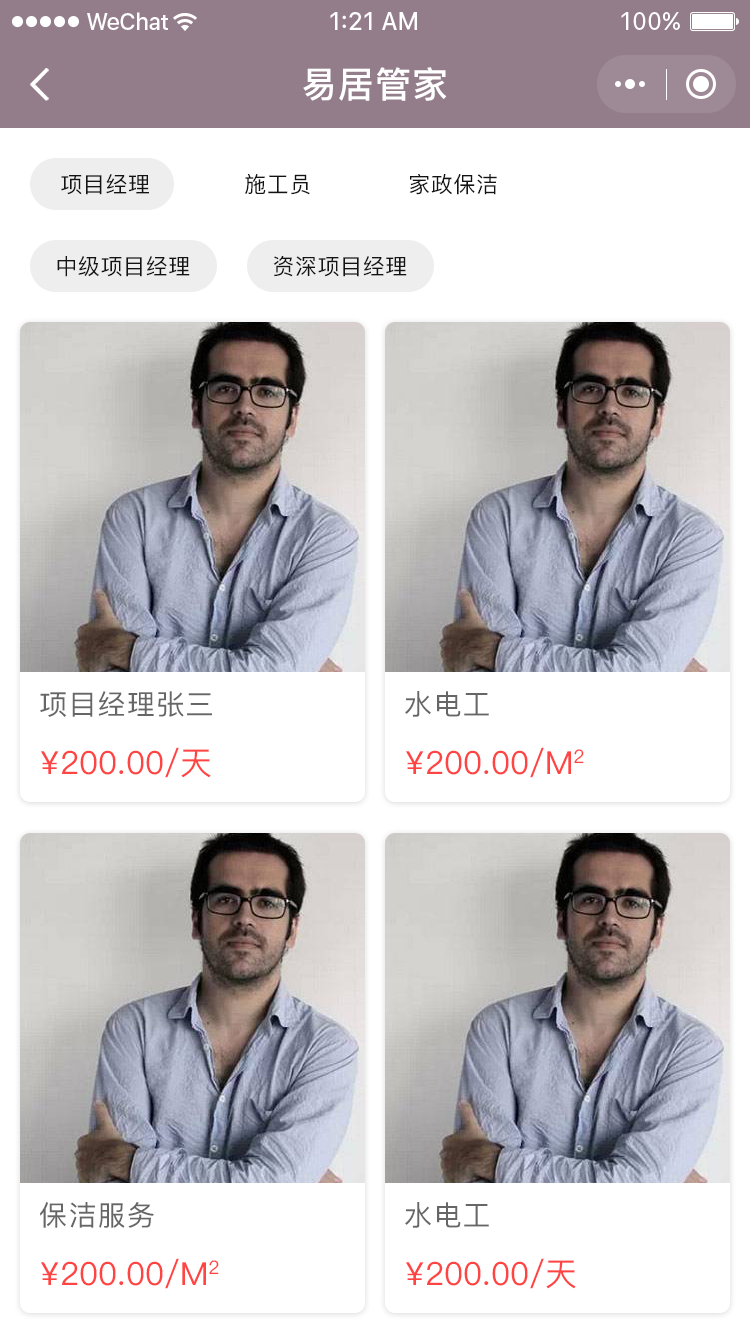
<style>
.page{position:relative;width:750px;height:1342px;background:#ffffff}
.page>*{position:absolute;margin:0}
.t1{font:36px "PingFang-SC-Bold";letter-spacing:0.028em;color:#ffffff}
.t2{font:22px "PingFang-SC-Medium";letter-spacing:0.028em;color:#131313}
.t3{font:28px "PingFang-SC-Medium";letter-spacing:0.048em;color:#666666}
.t4{font:32px "PingFang-SC-Medium";color:#ff4444}
</style>
<div class="page">
<p class="t1" style="left:303px;top:67px;width:144px;height:34px">易居管家</p>
<p class="t2" style="left:61px;top:174px;width:88px;height:21px">项目经理</p>
<p class="t2" style="left:245px;top:174px;width:65px;height:21px">施工员</p>
<p class="t2" style="left:410px;top:174px;width:87px;height:21px">家政保洁</p>
<p class="t2" style="left:57px;top:256px;width:133px;height:21px">中级项目经理</p>
<p class="t2" style="left:273px;top:256px;width:134px;height:21px">资深项目经理</p>
<p class="t3" style="left:40px;top:691px;width:172px;height:26px">项目经理张三</p>
<p class="t3" style="left:405px;top:691px;width:84px;height:26px">水电工</p>
<p class="t4" style="left:41px;top:747px;width:170px;height:31px">¥200.00/天</p>
<p class="t4" style="left:406px;top:747px;width:178px;height:31px">¥200.00/M2</p>
<p class="t3" style="left:40px;top:1202px;width:114px;height:26px">保洁服务</p>
<p class="t3" style="left:405px;top:1202px;width:84px;height:26px">水电工</p>
<p class="t4" style="left:41px;top:1258px;width:178px;height:31px">¥200.00/M2</p>
<p class="t4" style="left:406px;top:1258px;width:170px;height:31px">¥200.00/天</p>
</div>
